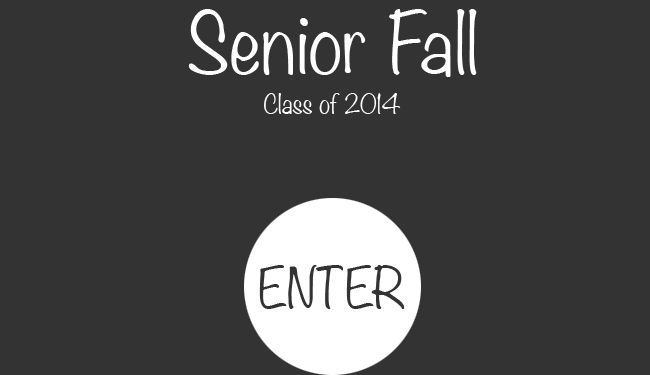
<style>
.page{position:relative;width:650px;height:375px;background:#333333}
.page>*{position:absolute;margin:0}
.t1{font:75px "Noteworthy-Light";color:#ffffff}
.t2{font:24px "Noteworthy-Light";color:#fefcfc}
.t3{font:50px "Noteworthy-Light";color:#333333}
</style>
<div class="page">
<p class="t1" style="left:188px;top:9px;width:289px;height:68px">Senior Fall</p>
<p class="t2" style="left:264px;top:93px;width:137px;height:21px">Class of 2014</p>
<p class="t3" style="left:259px;top:265px;width:146px;height:44px">ENTER</p>
</div>
